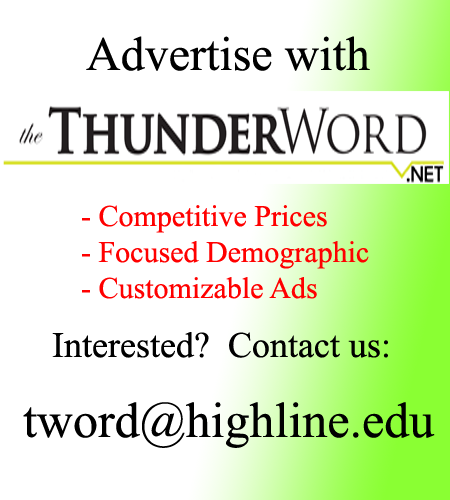
<style>
.page{position:relative;width:450px;height:500px;background:#ffffff}
.page>*{position:absolute;margin:0}
.t1{font:48px "TimesNewRomanPSMT";color:#000000}
.t2{font:30px "TimesNewRomanPSMT";color:#ff0000}
.t3{font:36px "TimesNewRomanPSMT";color:#000000}
.t4{font:50px "TimesNewRomanPSMT";color:#000000}
</style>
<div class="page">
<p class="t1" style="left:86px;top:36px;width:284px;height:35px">Advertise with</p>
<p class="t2" style="left:82px;top:205px;width:287px;height:94px">- Competitive Prices<br>- Focused Demographic<br>- Customizable Ads</p>
<p class="t3" style="left:52px;top:332px;width:336px;height:26px">Interested?  Contact us:</p>
<p class="t4" style="left:23px;top:402px;width:412px;height:46px">tword@highline.edu</p>
</div>
